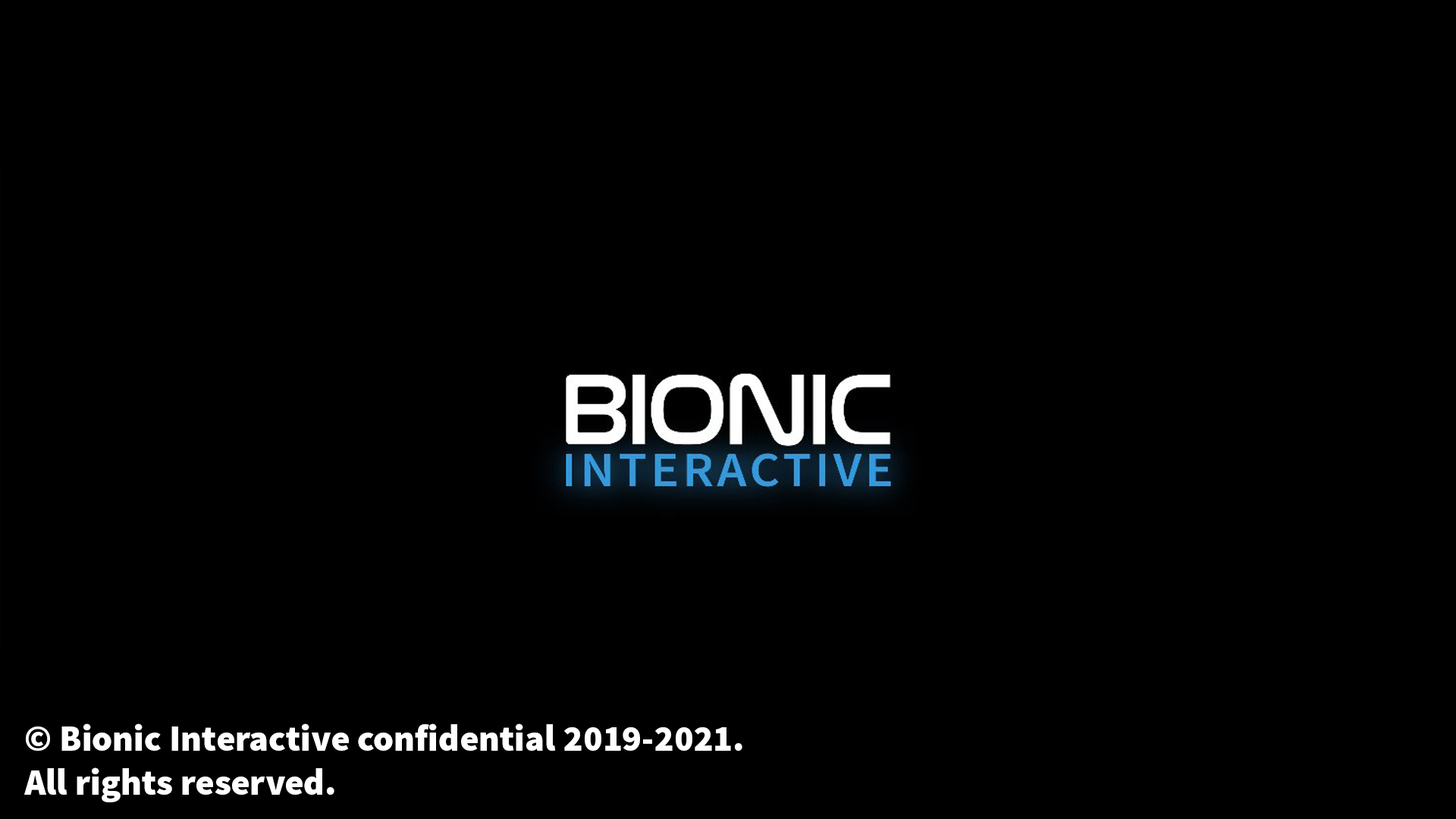
<style>
.page{position:relative;width:1456px;height:819px;background:#000000}
.page>*{position:absolute;margin:0}
.t1{font:36.4px "SourceSansPro-Black";color:#ffffff}
</style>
<div class="page">
<p class="t1" style="left:24px;top:723px;width:718px;height:79px">© Bionic Interactive confidential 2019-2021. <br>All rights reserved.</p>
</div>
